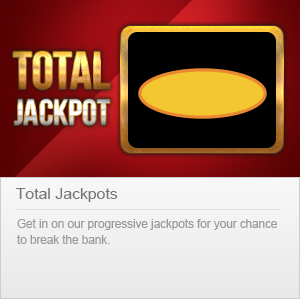
<style>
.page{position:relative;width:300px;height:299px}
.page>*{position:absolute;margin:0}
.t1{font:15.4px "ArialMT";color:#747474}
.t2{font:11.7px/16px "ArialMT";color:#999999}
</style>
<div class="page">
<p class="t1" style="left:16px;top:188px;width:102px;height:14px">Total Jackpots</p>
<p class="t2" style="left:17px;top:219px;width:260px;height:25px">Get in on our progressive jackpots for your chance to break the bank.</p>
</div>
